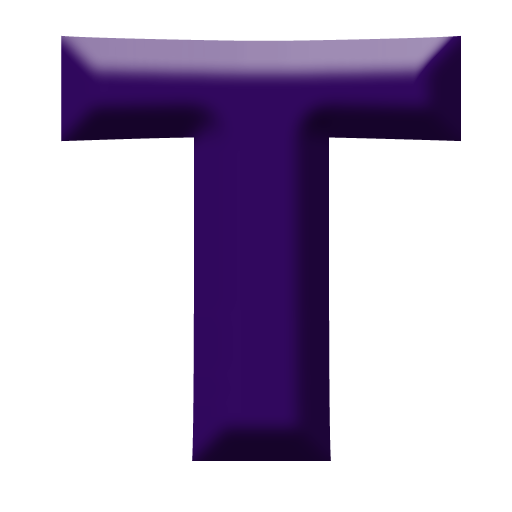
<style>
.page{position:relative;width:512px;height:512px;background:#ffffff}
.page>*{position:absolute;margin:0}
.t1{font:600px "LithosPro-Black"}
</style>
<div class="page">
<p class="t1" style="left:61px;top:35px;width:400px;height:426px">T</p>
</div>
